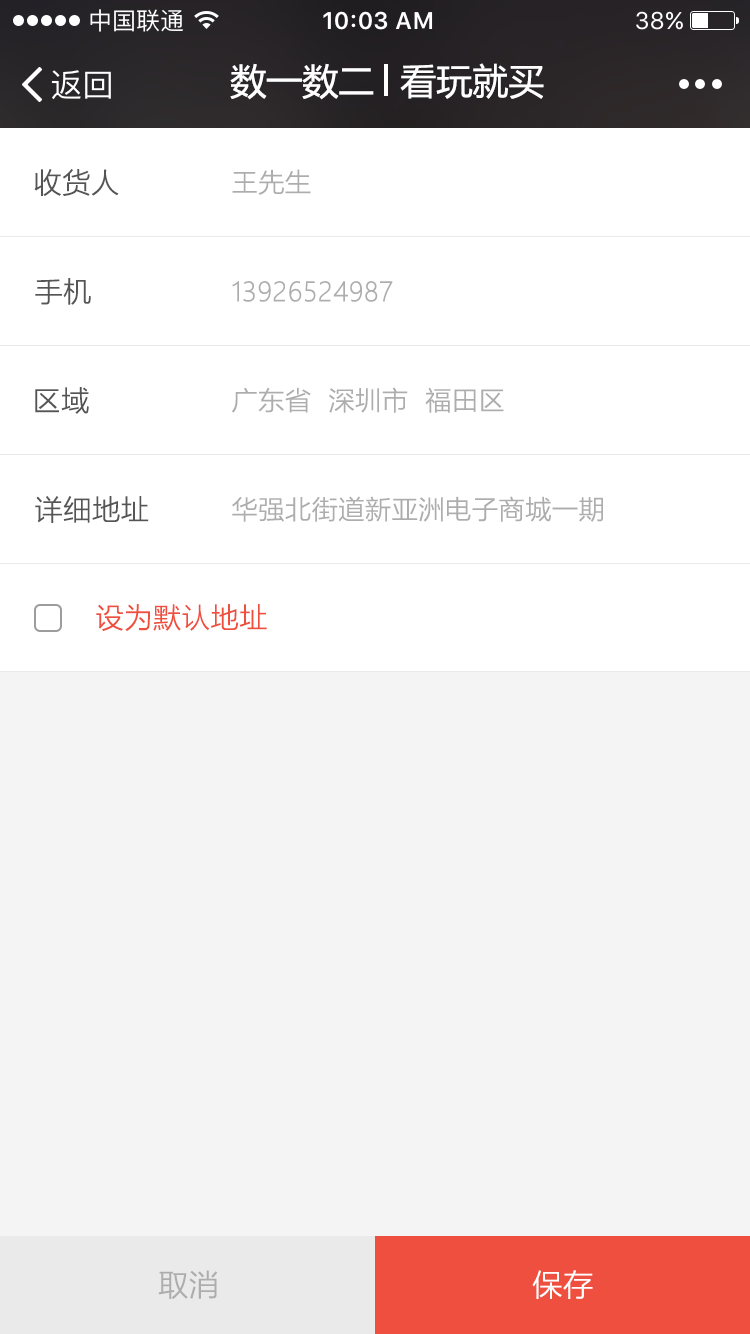
<style>
.page{position:relative;width:750px;height:1334px;background:#f4f4f4}
.page>*{position:absolute;margin:0}
.t1{font:36px "MicrosoftYaHei";color:#ffffff}
.t2{font:28px "MicrosoftYaHeiLight";color:#555555;font-weight:bold}
.t3{font:26px "MicrosoftYaHeiLight";color:#adadad;font-weight:bold}
.t4{font:28px "MicrosoftYaHeiLight";color:#ef4f3e;font-weight:bold}
.t5{font:30px "MicrosoftYaHeiLight";color:#adadad;font-weight:bold}
.t6{font:30px "MicrosoftYaHeiLight";color:#ffffff;font-weight:bold}
</style>
<div class="page">
<p class="t1" style="left:230px;top:63px;width:144px;height:37px">数一数二</p>
<p class="t1" style="left:400px;top:63px;width:144px;height:36px">看玩就买</p>
<p class="t2" style="left:34px;top:169px;width:85px;height:27px">收货人</p>
<p class="t3" style="left:232px;top:169px;width:79px;height:26px">王先生</p>
<p class="t2" style="left:35px;top:278px;width:56px;height:27px">手机</p>
<p class="t3" style="left:232px;top:281px;width:161px;height:21px">13926524987</p>
<p class="t2" style="left:35px;top:387px;width:54px;height:27px">区域</p>
<p class="t3" style="left:232px;top:387px;width:272px;height:26px">广东省  深圳市  福田区</p>
<p class="t2" style="left:35px;top:496px;width:114px;height:27px">详细地址</p>
<p class="t3" style="left:232px;top:496px;width:371px;height:26px">华强北街道新亚洲电子商城一期</p>
<p class="t4" style="left:96px;top:604px;width:171px;height:27px">设为默认地址</p>
<p class="t5" style="left:158px;top:1270px;width:59px;height:29px">取消</p>
<p class="t6" style="left:532px;top:1270px;width:61px;height:29px">保存</p>
</div>
